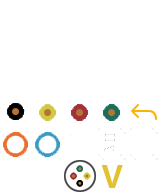
<style>
.page{position:relative;width:160px;height:192px;background:#ffffff}
.page>*{position:absolute;margin:0}
.t1{font:30px "MicrosoftYaHei-Bold";color:#e2c22e;text-transform:uppercase}
</style>
<div class="page">
<p class="t1" style="left:101px;top:165px;width:22px;height:23px">V</p>
</div>
